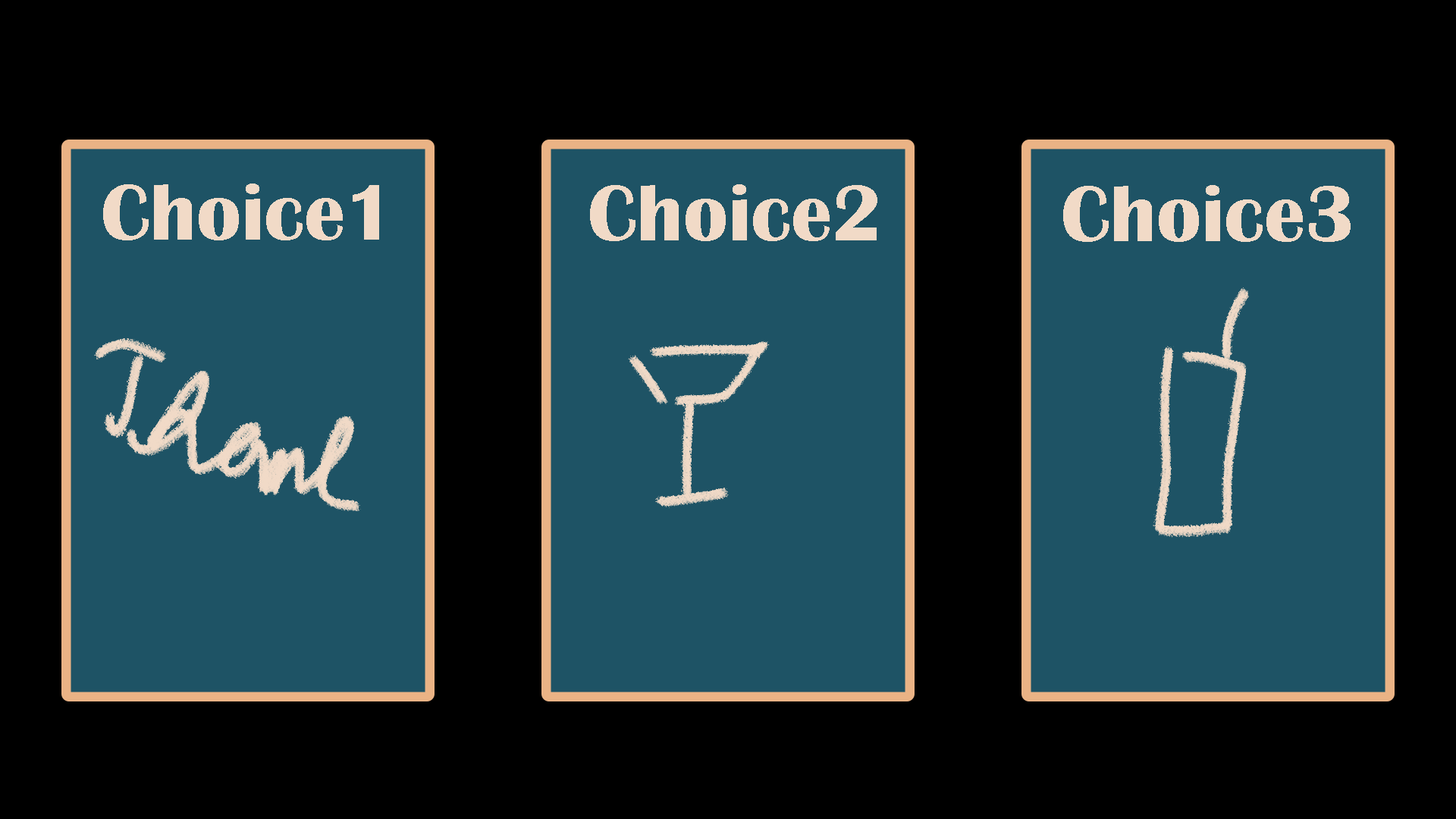
<style>
.page{position:relative;width:1456px;height:819px;background:#000000}
.page>*{position:absolute;margin:0}
.t1{font:82.2px "BritannicBold";color:#f1dac7}
</style>
<div class="page">
<p class="t1" style="left:103px;top:184px;width:276px;height:56px">Choice1</p>
<p class="t1" style="left:590px;top:184px;width:287px;height:57px">Choice2</p>
<p class="t1" style="left:1063px;top:185px;width:288px;height:57px">Choice3</p>
</div>
